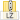
<style>
.page{position:relative;width:20px;height:20px;background:#ffffff}
.page>*{position:absolute;margin:0}
.t1{font:7px "SegoeUI";color:#64625b}
</style>
<div class="page">
<p class="t1" style="left:6px;top:12px;width:8px;height:7px">LZ</p>
</div>
